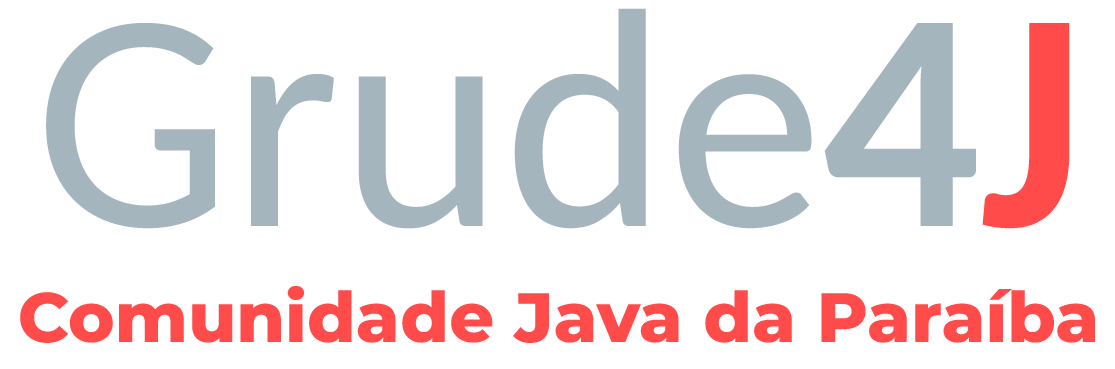
<style>
.page{position:relative;width:1115px;height:369px;background:#ffffff}
.page>*{position:absolute;margin:0}
.t1{font:312.9px "Carlito";color:#a5b5bd}
.t2{font:312.9px "Carlito-Bold";color:#a5b5bd}
.t3{font:312.9px "Carlito-Bold";color:#ff4b4a}
.t4{font:69.8px "Montserrat-ExtraBold";color:#ff4b4a}
</style>
<div class="page">
<p class="t1" style="left:46px;top:8px;width:1024px;height:221px">Grude<span class="t2">4</span><span class="t3">J</span></p>
<p class="t4" style="left:20px;top:286px;width:1075px;height:57px">Comunidade Java da Paraíba</p>
</div>
